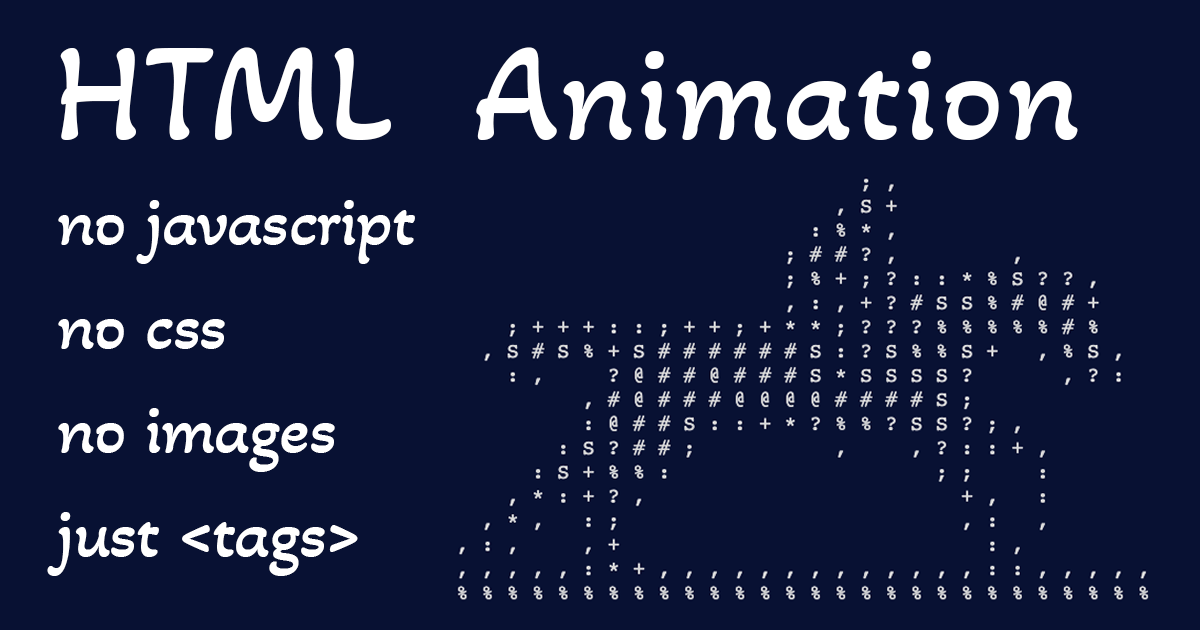
<style>
.page{position:relative;width:1200px;height:630px;background:#081133}
.page>*{position:absolute;margin:0}
.t1{font:138px "AkayaTelivigala-Regular";letter-spacing:0.02em;color:#ffffff}
.t2{font:71.5px/104px "AkayaTelivigala-Regular";letter-spacing:-0.02em;color:#ffffff}
</style>
<div class="page">
<p class="t1" style="left:60px;top:47px;width:1018px;height:93px">HTML  Animation</p>
<p class="t2" style="left:47px;top:200px;width:368px;height:376px">no javascript<br>no css<br>no images<br>just &lt;tags&gt;</p>
</div>
